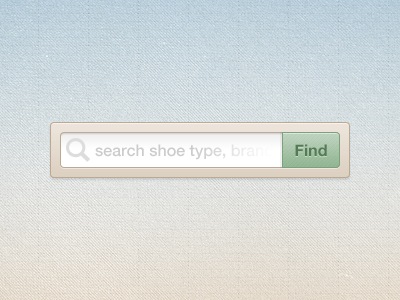
<style>
.page{position:relative;width:400px;height:300px}
.page>*{position:absolute;margin:0}
.t1{font:16px "HelveticaNeue-Medium";color:#cccccc}
.t2{font:16px "HelveticaNeue-Bold";color:#557b56}
</style>
<div class="page">
<p class="t1" style="left:95px;top:144px;width:229px;height:16px">search shoe type, brand, name</p>
<p class="t2" style="left:295px;top:144px;width:32px;height:13px">Find</p>
</div>
